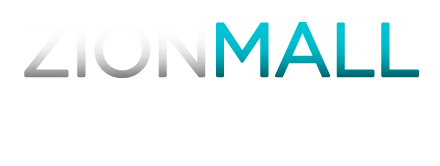
<style>
.page{position:relative;width:440px;height:166px;background:#ffffff}
.page>*{position:absolute;margin:0}
.t1{font:74.8px "Gotham-Book";letter-spacing:-0.05em;font-weight:bold}
</style>
<div class="page">
<p class="t1" style="left:24px;top:21px;width:395px;height:57px">ZIONMALL</p>
</div>
